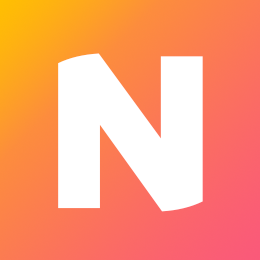
<style>
.page{position:relative;width:260px;height:260px;background:#ffffff}
.page>*{position:absolute;margin:0}
.t1{font:235.4px "IskraCYR-UltraBold";color:#ffffff}
</style>
<div class="page">
<p class="t1" style="left:58px;top:53px;width:145px;height:159px">N</p>
</div>
